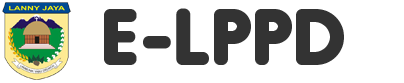
<style>
.page{position:relative;width:404px;height:83px;background:#ffffff}
.page>*{position:absolute;margin:0}
.t1{font:75px "Oduda-Bold";color:#333333;font-weight:bold}
</style>
<div class="page">
<p class="t1" style="left:104px;top:8px;width:240px;height:57px">E-LPPD</p>
</div>
